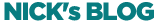
<style>
.page{position:relative;width:160px;height:25px;background:#ffffff}
.page>*{position:absolute;margin:0}
.t1{font:25px "GothamBlack";letter-spacing:-0.05em;color:#087c80}
</style>
<div class="page">
<p class="t1" style="left:4px;top:2px;width:150px;height:19px">NICK's BLOG</p>
</div>
